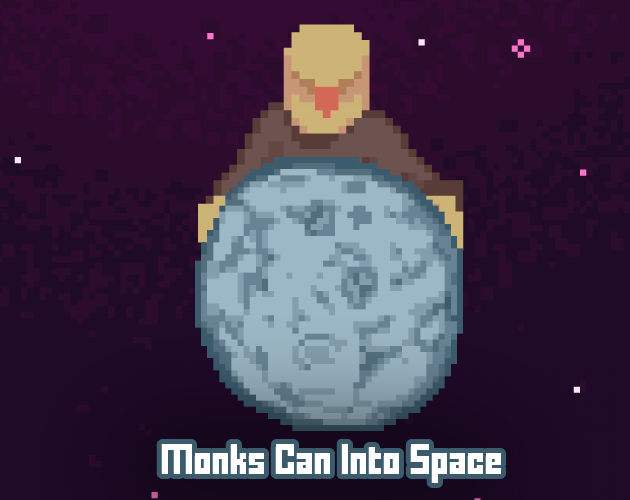
<style>
.page{position:relative;width:630px;height:500px;background:#2c0c2c}
.page>*{position:absolute;margin:0}
.t1{font:24px "FFFForward";color:#ffffff}
</style>
<div class="page">
<p class="t1" style="left:161px;top:443px;width:340px;height:41px">Monks Can Into Space</p>
</div>
